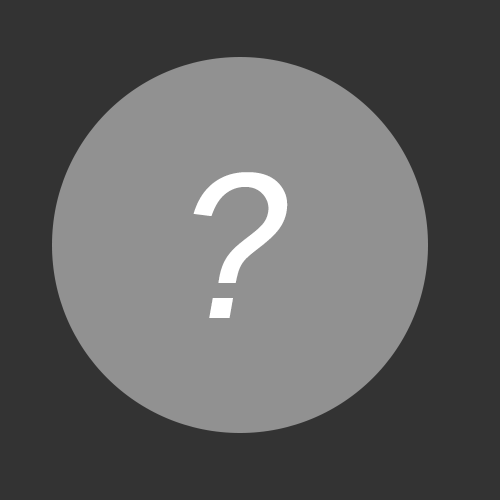
<style>
.page{position:relative;width:500px;height:500px;background:#333333}
.page>*{position:absolute;margin:0}
.t1{font:200px "ArialMT";color:#ffffff;font-variant:small-caps;font-style:italic}
</style>
<div class="page">
<p class="t1" style="left:193px;top:172px;width:95px;height:146px">?</p>
</div>
